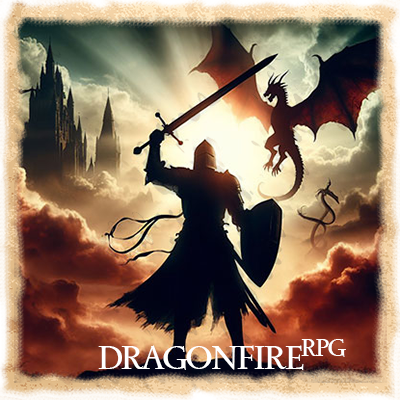
<style>
.page{position:relative;width:400px;height:400px}
.page>*{position:absolute;margin:0}
.t1{font:24.1px "SedanSC-Regular";letter-spacing:-0.075em;color:#ffffff}
.t2{font:34.1px "SedanSC-Regular";letter-spacing:-0.075em;color:#ffffff}
</style>
<div class="page">
<p class="t1" style="left:301px;top:339px;width:45px;height:18px">RPG</p>
<p class="t2" style="left:98px;top:345px;width:206px;height:25px">DRAGONFIRE</p>
</div>
